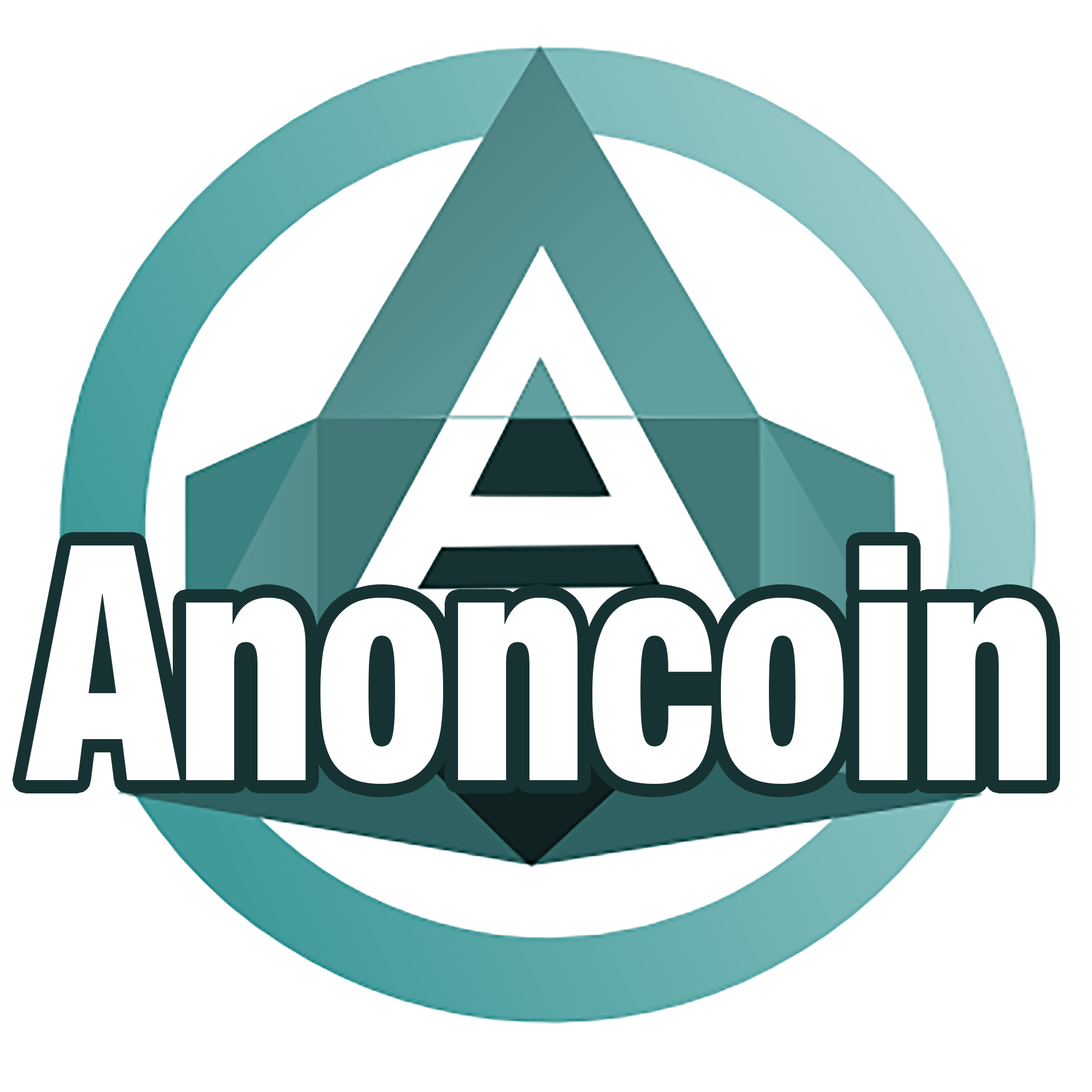
<style>
.page{position:relative;width:1092px;height:1092px;background:#ffffff}
.page>*{position:absolute;margin:0}
.t1{font:328.3px "HelveticaNeue-CondensedBlack";color:#ffffff;scale:0.81 1}
</style>
<div class="page">
<p class="t1" style="left:26px;top:545px;width:1021px;height:239px">Anoncoin</p>
</div>
